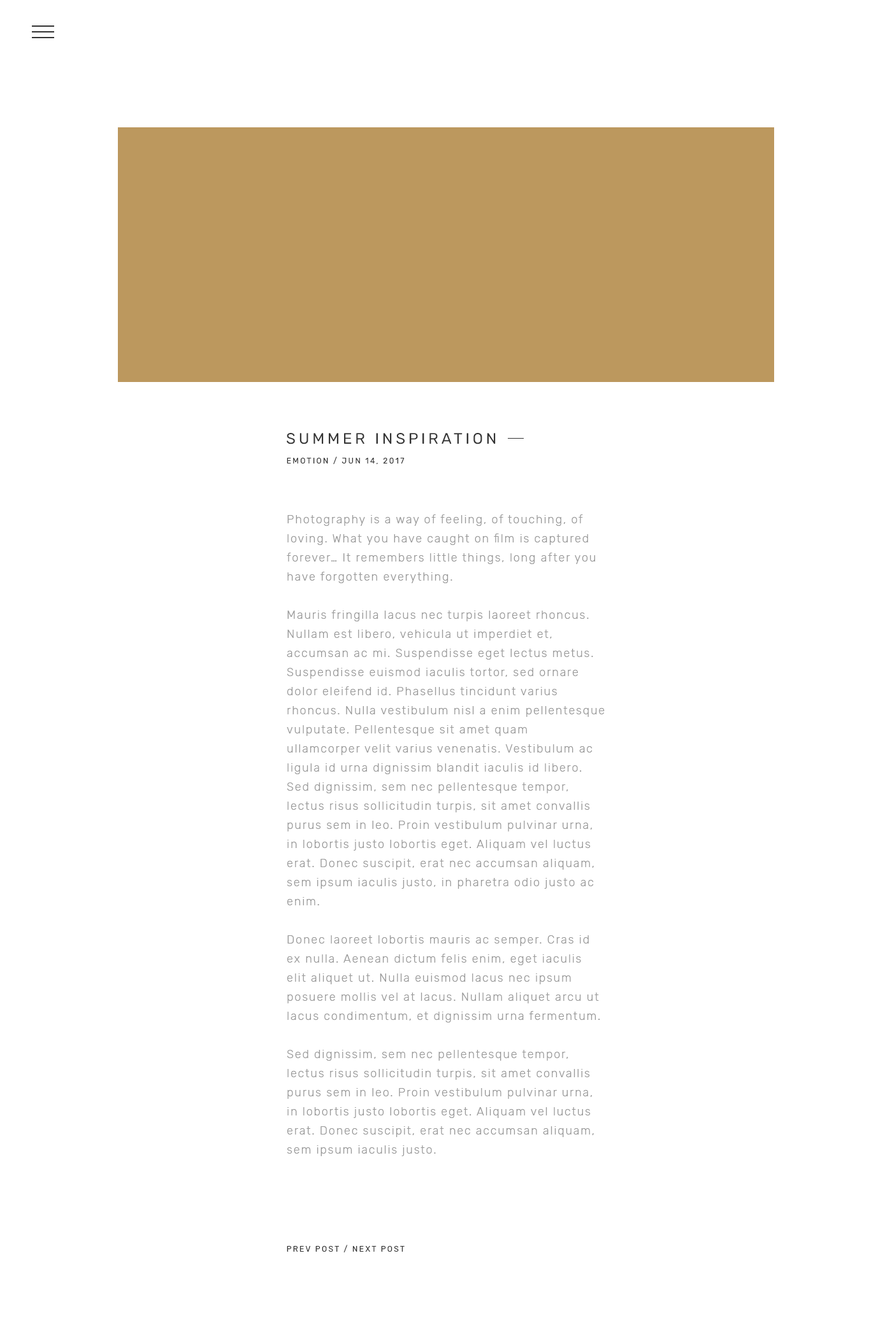
<style>
.page{position:relative;width:892px;height:1337px;background:#ffffff}
.page>*{position:absolute;margin:0}
.t1{font:15.3px "Rubik-Regular";letter-spacing:0.2em;color:#333333;text-transform:uppercase}
.t2{font:7.6px "Rubik-Regular";letter-spacing:0.2em;color:#333333;text-transform:uppercase}
.t3{font:11.5px/19.1px "Rubik-Light";letter-spacing:0.1em;color:#999999}
</style>
<div class="page">
<p class="t1" style="left:287px;top:433px;width:208px;height:12px">Summer Inspiration</p>
<p class="t2" style="left:287px;top:457px;width:117px;height:7px">Emotion / Jun 14, 2017</p>
<p class="t3" style="left:287px;top:515px;width:317px;height:642px">Photography is a way of feeling, of touching, of loving. What you have caught on film is captured forever… It remembers little things, long after you have forgotten everything. <br><br>Mauris fringilla lacus nec turpis laoreet rhoncus. Nullam est libero, vehicula ut imperdiet et, accumsan ac mi. Suspendisse eget lectus metus. Suspendisse euismod iaculis tortor, sed ornare dolor eleifend id. Phasellus tincidunt varius rhoncus. Nulla vestibulum nisl a enim pellentesque vulputate. Pellentesque sit amet quam ullamcorper velit varius venenatis. Vestibulum ac ligula id urna dignissim blandit iaculis id libero. Sed dignissim, sem nec pellentesque tempor, lectus risus sollicitudin turpis, sit amet convallis purus sem in leo. Proin vestibulum pulvinar urna, in lobortis justo lobortis eget. Aliquam vel luctus erat. Donec suscipit, erat nec accumsan aliquam, sem ipsum iaculis justo, in pharetra odio justo ac enim.<br><br>Donec laoreet lobortis mauris ac semper. Cras id ex nulla. Aenean dictum felis enim, eget iaculis elit aliquet ut. Nulla euismod lacus nec ipsum posuere mollis vel at lacus. Nullam aliquet arcu ut lacus condimentum, et dignissim urna fermentum.<br><br>Sed dignissim, sem nec pellentesque tempor, lectus risus sollicitudin turpis, sit amet convallis purus sem in leo. Proin vestibulum pulvinar urna, in lobortis justo lobortis eget. Aliquam vel luctus erat. Donec suscipit, erat nec accumsan aliquam, sem ipsum iaculis justo.</p>
<p class="t2" style="left:287px;top:1245px;width:117px;height:8px">Prev Post / Next Post</p>
</div>
